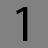
<style>
.page{position:relative;width:48px;height:48px;background:#818181}
.page>*{position:absolute;margin:0}
.t1{font:52px "MyriadPro-Regular";color:#000000}
</style>
<div class="page">
<p class="t1" style="left:16px;top:7px;width:12px;height:34px">1</p>
</div>
